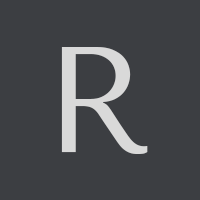
<style>
.page{position:relative;width:200px;height:200px;background:#3c3e42}
.page>*{position:absolute;margin:0}
.t1{font:150px "TenorSans";color:#d9d9d9}
</style>
<div class="page">
<p class="t1" style="left:61px;top:47px;width:87px;height:107px">R</p>
</div>
